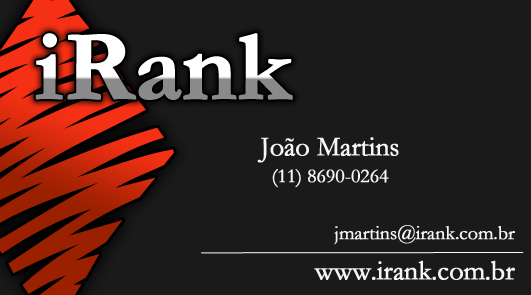
<style>
.page{position:relative;width:531px;height:295px;background:#1a1a1a}
.page>*{position:absolute;margin:0}
.t1{font:100.3px "Garamond-Bold";letter-spacing:-0.025em;font-weight:bold}
.t2{font:27.8px "Garamond";letter-spacing:-0.025em;color:#f6f6f6;font-weight:bold}
.t3{font:20px "Garamond";letter-spacing:-0.025em;color:#f6f6f6;font-weight:bold}
</style>
<div class="page">
<p class="t1" style="left:35px;top:33px;width:258px;height:67px">iRank</p>
<p class="t2" style="left:257px;top:137px;width:142px;height:26px">João Martins</p>
<p class="t3" style="left:272px;top:169px;width:117px;height:19px">(11) 8690-0264</p>
<p class="t3" style="left:334px;top:225px;width:181px;height:20px">jmartins@irank.com.br</p>
<p class="t2" style="left:314px;top:260px;width:201px;height:20px">www.irank.com.br</p>
</div>
